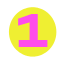
<style>
.page{position:relative;width:64px;height:64px;background:#ffffff}
.page>*{position:absolute;margin:0}
.t1{font:70.3px "Corbel-Bold";color:#ff4cec}
</style>
<div class="page">
<p class="t1" style="left:18px;top:14px;width:30px;height:33px">1</p>
</div>
